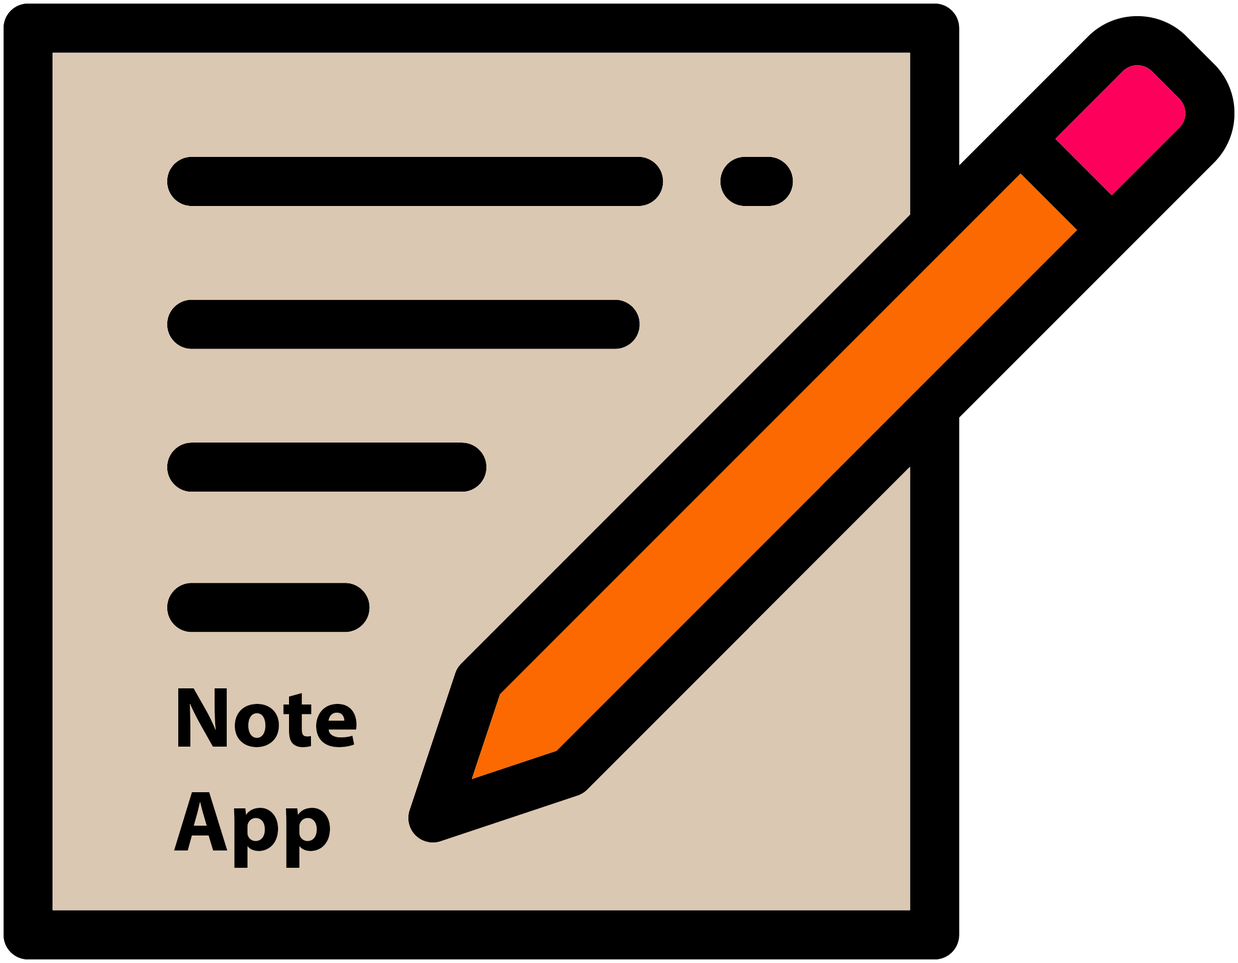
<style>
.page{position:relative;width:1238px;height:963px;background:#dbc8b2}
.page>*{position:absolute;margin:0}
.t1{font:86.5px "MyriadPro-Bold";color:#000000}
</style>
<div class="page">
<p class="t1" style="left:174px;top:688px;width:183px;height:180px">Note<br>App</p>
</div>
